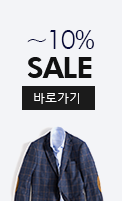
<style>
.page{position:relative;width:122px;height:201px;background:#f3f4f7}
.page>*{position:absolute;margin:0}
.t1{font:27px "FuturaBT-Light";letter-spacing:-0.05em;color:#070a3a;text-transform:uppercase}
.t2{font:30px "FuturaBT-Heavy";letter-spacing:-0.04em;color:#111111;text-transform:uppercase}
.t3{font:12px "MalgunGothicRegular";color:#ffffff;text-transform:uppercase}
</style>
<div class="page">
<p class="t1" style="left:27px;top:30px;width:67px;height:19px">~10%</p>
<p class="t2" style="left:27px;top:57px;width:65px;height:21px">SALE</p>
<p class="t3" style="left:34px;top:93px;width:45px;height:11px">바로가기</p>
</div>
